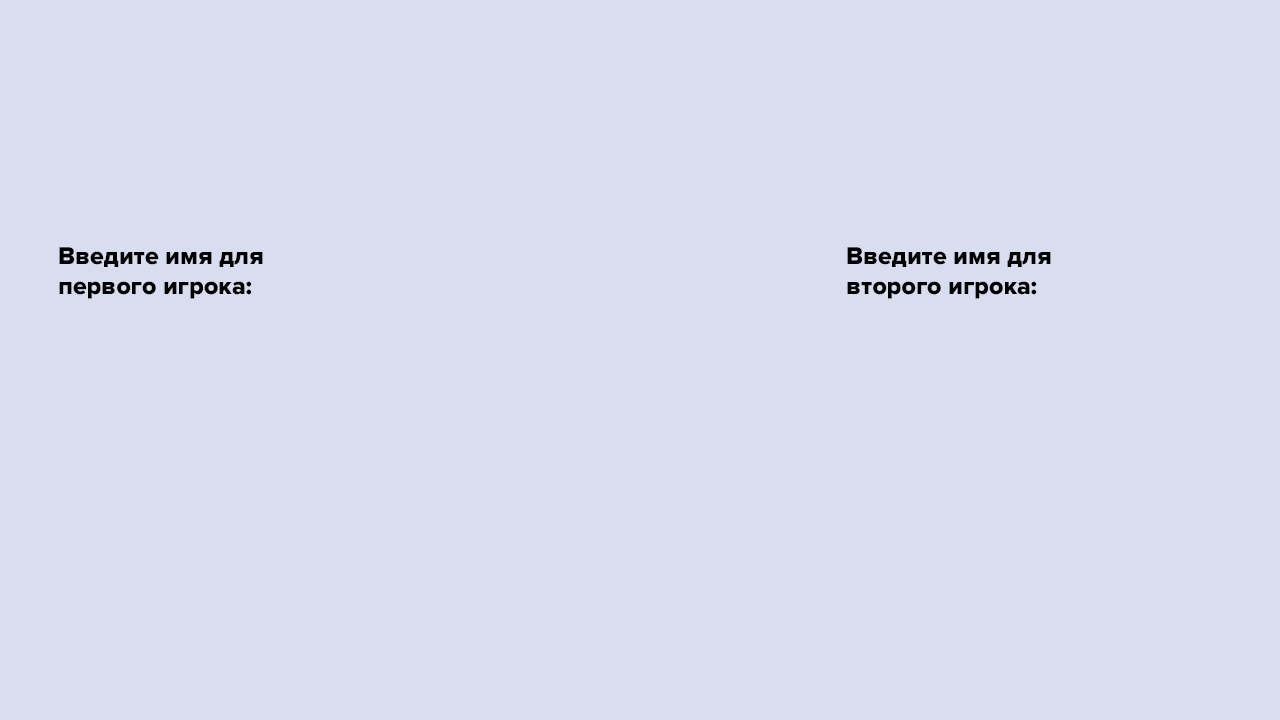
<style>
.page{position:relative;width:1280px;height:720px;background:#d8ddef}
.page>*{position:absolute;margin:0}
.t1{font:25px "ProximaNova-Extrabld";color:#000000}
</style>
<div class="page">
<p class="t1" style="left:59px;top:247px;width:204px;height:52px">Введите имя для<br>первого игрока:</p>
<p class="t1" style="left:847px;top:247px;width:204px;height:52px">Введите имя для<br>второго игрока:</p>
</div>
